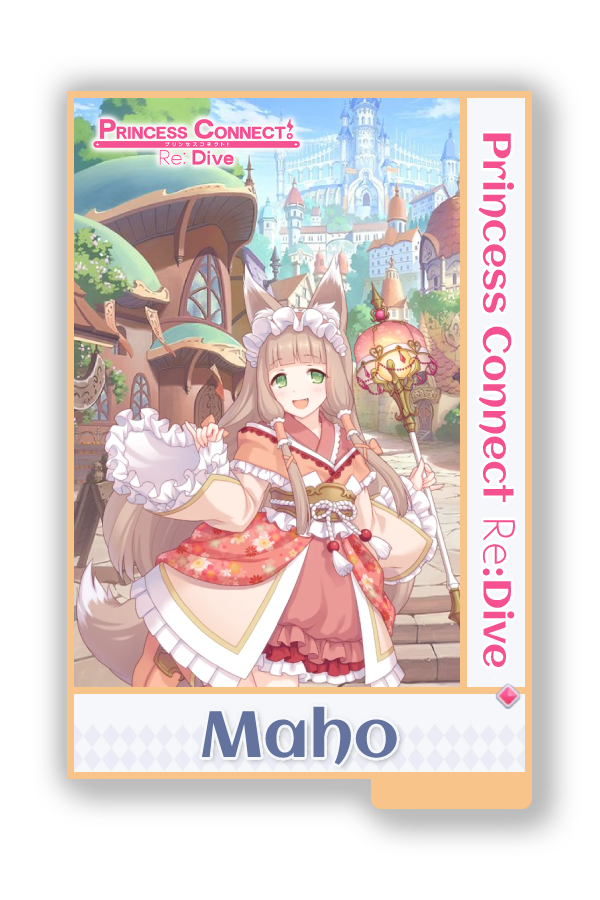
<style>
.page{position:relative;width:600px;height:900px;background:#ffffff}
.page>*{position:absolute;margin:0}
.t1{font:39px "Aclonica-Regular";color:#f55191}
.t2{font:39px "AaarghNormal";color:#f55191}
.t3{font:65px "Aclonica-Regular";color:#64739d}
</style>
<div class="page">
<p class="t1" style="left:478px;top:133px;width:38px;height:534px;rotate:90deg">Princess Connect <span class="t2">Re</span>:Dive</p>
<p class="t3" style="left:201px;top:706px;width:196px;height:59px">Maho</p>
</div>
